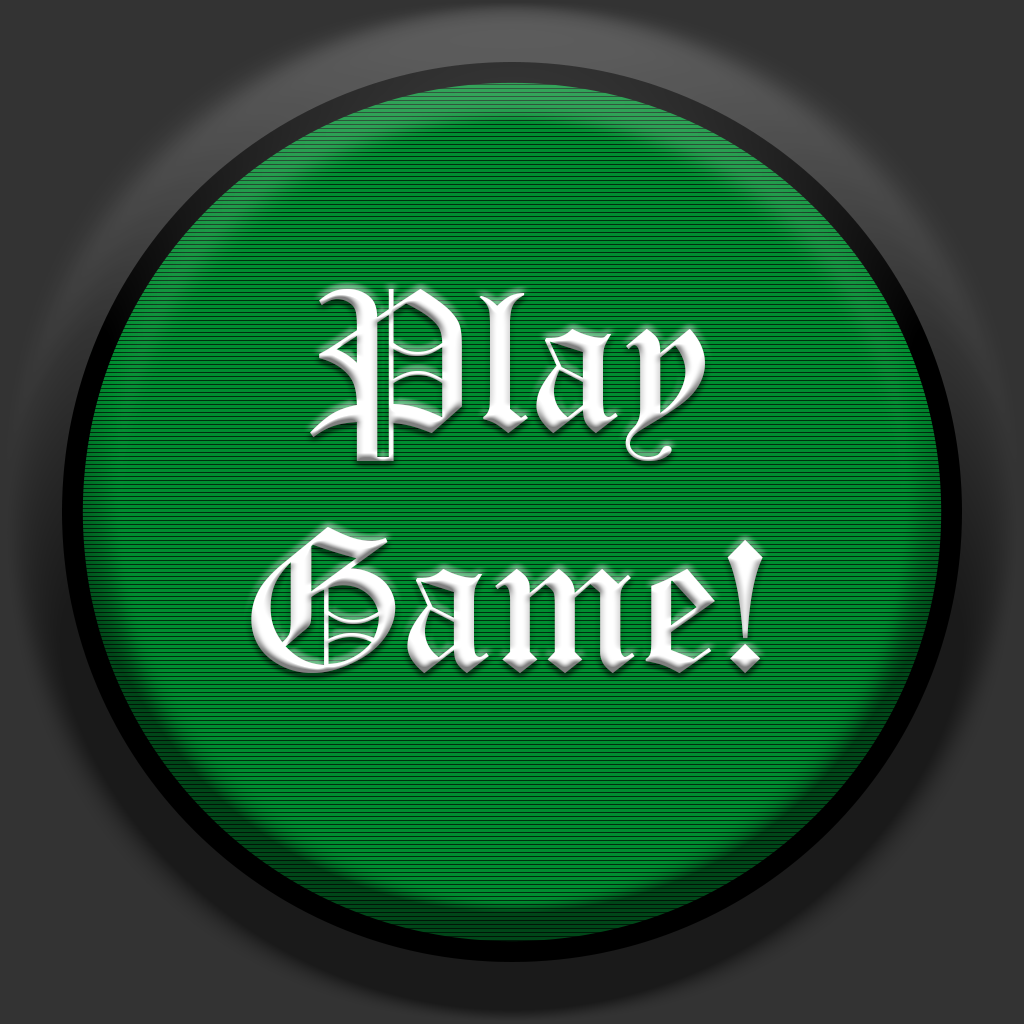
<style>
.page{position:relative;width:1024px;height:1024px;background:#002f10}
.page>*{position:absolute;margin:0}
.t1{font:200px "OldEnglishTextMT";color:#ffffff}
</style>
<div class="page">
<p class="t1" style="left:251px;top:289px;width:512px;height:384px;text-align:center">Play<br>Game!</p>
</div>
